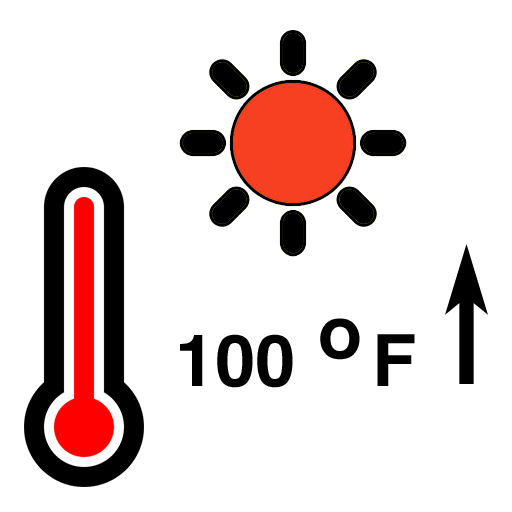
<style>
.page{position:relative;width:512px;height:512px;background:#ffffff}
.page>*{position:absolute;margin:0}
.t1{font:72px "Helvetica-Bold";color:#000000}
</style>
<div class="page">
<p class="t1" style="left:320px;top:318px;width:40px;height:42px">o</p>
<p class="t1" style="left:180px;top:334px;width:113px;height:54px">100</p>
<p class="t1" style="left:377px;top:334px;width:38px;height:52px">F</p>
</div>
